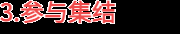
<style>
.page{position:relative;width:180px;height:34px;background:#000000}
.page>*{position:absolute;margin:0}
.t1{font:24px "WebPSD-18463539-0-Regular";color:#ef4b4b;font-weight:bold}
</style>
<div class="page">
<p class="t1" style="left:0px;top:0px;width:180px;height:34px">3.参与集结</p>
</div>
